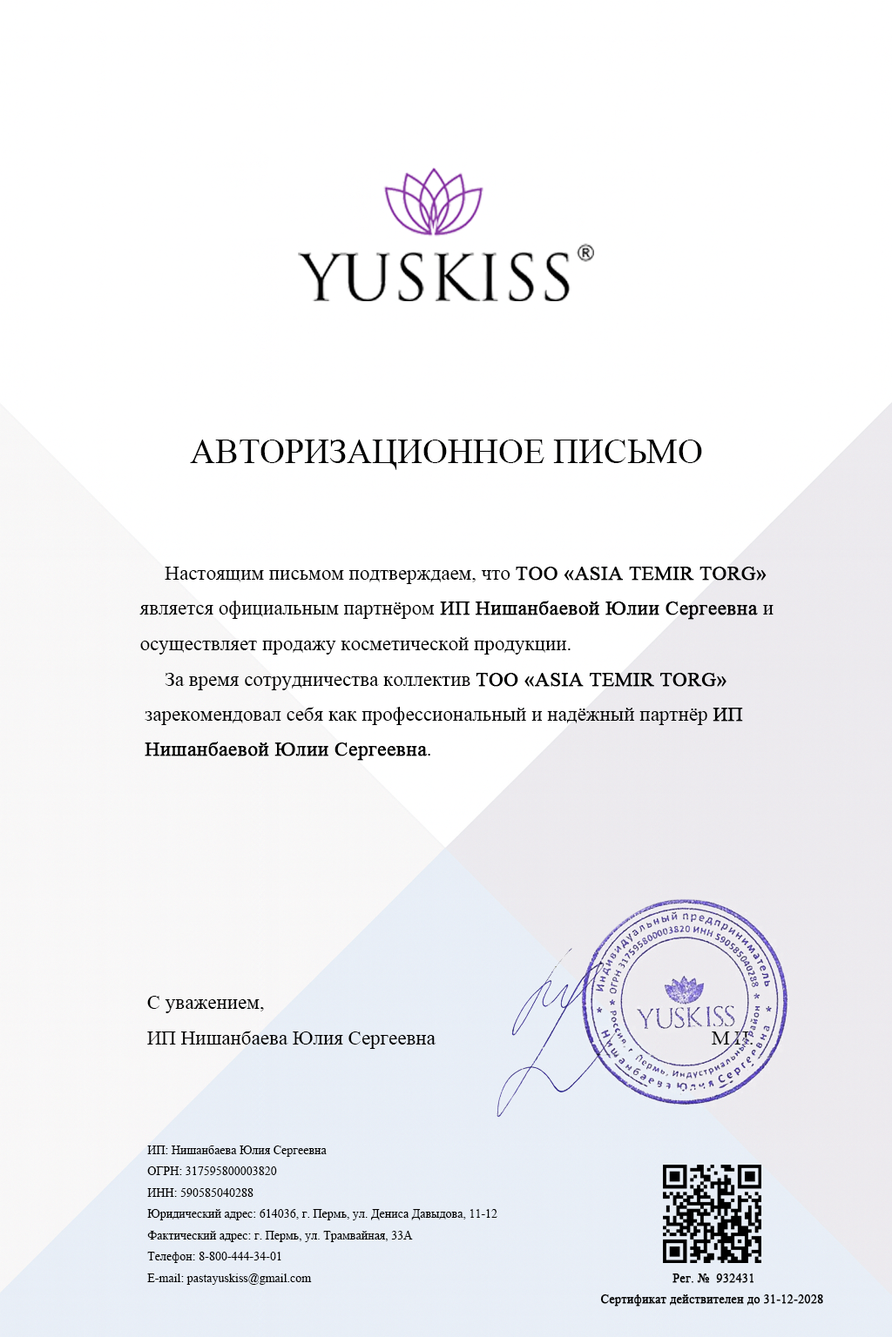
<style>
.page{position:relative;width:892px;height:1337px;background:#ffffff}
.page>*{position:absolute;margin:0}
.t1{font:34.8px "TimesNewRomanPSMT";color:#000000}
.t2{font:20px "TimesNewRomanPSMT";color:#000000}
.t3{font:20px "TimesNewRomanPSMT";color:#000000;font-weight:bold}
.t4{font:20px "TimesNewRomanPSMT"}
.t5{font:12.2px "TimesNewRomanPSMT";color:#000000}
.t6{font:12.2px "TimesNewRomanPSMT";color:#000000;font-weight:bold}
</style>
<div class="page">
<p class="t1" style="left:190px;top:440px;width:512px;height:30px">АВТОРИЗАЦИОННОЕ ПИСЬМО</p>
<p class="t2" style="left:139px;top:567px;width:634px;height:88px">Настоящим письмом подтверждаем, что <span class="t3">ТОО «ASIA TEMIR TORG»<br></span> является официальным партнёром<span class="t3"> ИП Нишанбаевой Юлии Сергеевна </span>и<br> осуществляет продажу косметической продукции.</p>
<p class="t2" style="left:145px;top:673px;width:598px;height:88px">За время сотрудничества коллектив <span class="t3">ТОО «ASIA TEMIR TORG» <br></span>зарекомендовал себя как профессиональный и надёжный партнёр <span class="t3">ИП <br>Нишанбаевой Юлии Сергеевна</span>.</p>
<p class="t2" style="left:147px;top:996px;width:289px;height:53px">С уважением,<br>ИП Нишанбаева Юлия Сергеевна</p>
<p class="t4" style="left:711px;top:1032px;width:41px;height:13px">М.П.</p>
<p class="t5" style="left:147px;top:1146px;width:350px;height:139px">ИП: Нишанбаева Юлия Сергеевна<br>ОГРН: 317595800003820<br>ИНН: 590585040288<br>Юридический адрес: 614036, г. Пермь, ул. Дениса Давыдова, 11-12<br>Фактический адрес: г. Пермь, ул. Трамвайная, 33А<br>Телефон: 8-800-444-34-01<br>E-mail: pastayuskiss@gmail.com</p>
<p class="t6" style="left:672px;top:1274px;width:81px;height:9px">Рег. №  932431</p>
<p class="t6" style="left:600px;top:1295px;width:223px;height:12px">Сертификат действителен до 31-12-2028</p>
</div>
